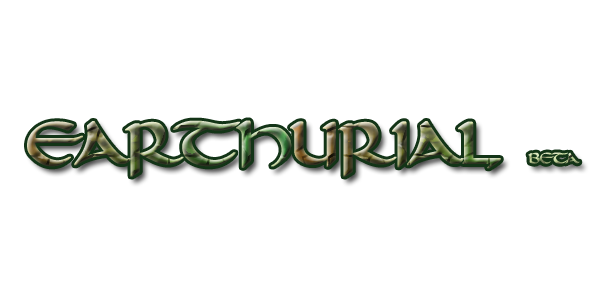
<style>
.page{position:relative;width:600px;height:300px;background:#ffffff}
.page>*{position:absolute;margin:0}
.t1{font:72px "DorovarFLF-Carolus";letter-spacing:-0.025em;font-weight:bold}
.t2{font:18px "DorovarFLF-Carolus";letter-spacing:-0.05em;font-weight:bold}
</style>
<div class="page">
<p class="t1" style="left:27px;top:120px;width:553px;height:57px">EARTHURIAL <span class="t2">BETA</span></p>
</div>
